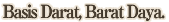
<style>
.page{position:relative;width:169px;height:22px;background:#ffffff}
.page>*{position:absolute;margin:0}
.t1{font:18px "RyuminPro-ExBold";letter-spacing:-0.08em;color:#534738;scale:0.9 1}
</style>
<div class="page">
<p class="t1" style="left:3px;top:4px;width:162px;height:17px">Basis Darat, Barat Daya.</p>
</div>
